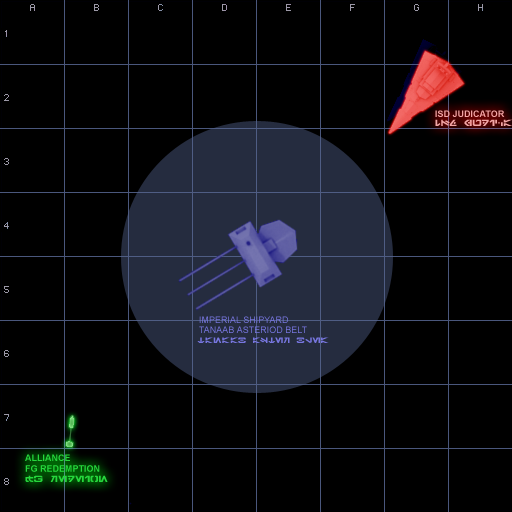
<style>
.page{position:relative;width:512px;height:512px;background:#000000}
.page>*{position:absolute;margin:0}
.t1{font:9px "Arial-BoldMT";color:#f3a6a6}
.t2{font:9px "Galactic-Basic";color:#f2a6a6}
.t3{font:9px "ArialMT"}
.t4{font:8px "Galactic-Basic";color:#7776df}
.t5{font:9px "Arial-BoldMT";color:#26d73d}
.t6{font:9px "Galactic-Basic";color:#26d73d}
</style>
<div class="page">
<p class="t1" style="left:435px;top:110px;width:70px;height:7px">ISD JUDICATOR</p>
<p class="t2" style="left:435px;top:119px;width:77px;height:7px">isd JUDICA</p>
<p class="t3" style="left:199px;top:316px;width:89px;height:7px">IMPERIAL SHIPYARD</p>
<p class="t3" style="left:199px;top:326px;width:108px;height:7px">TANAAB ASTERIOD BELT</p>
<p class="t4" style="left:197px;top:337px;width:132px;height:6px">TANAAB ASTER BLEA</p>
<p class="t5" style="left:25px;top:454px;width:75px;height:18px">ALLIANCE<br>FG REDEMPTION</p>
<p class="t6" style="left:25px;top:475px;width:83px;height:7px">FG REDEION</p>
</div>
